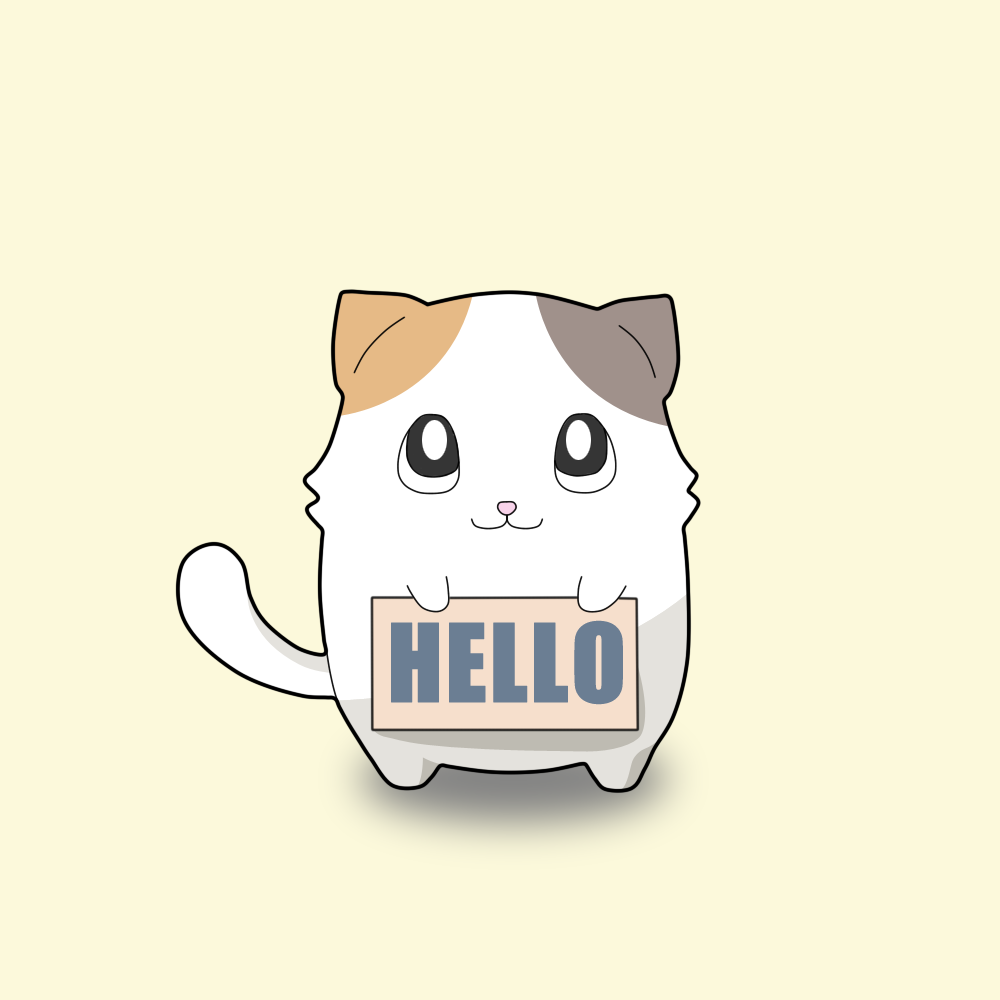
<style>
.page{position:relative;width:1000px;height:1000px;background:#fcf9db}
.page>*{position:absolute;margin:0}
.t1{font:100px "Impact";color:#6b7e93;text-transform:uppercase;font-weight:bold}
</style>
<div class="page">
<p class="t1" style="left:391px;top:620px;width:232px;height:85px">HELLO</p>
</div>
